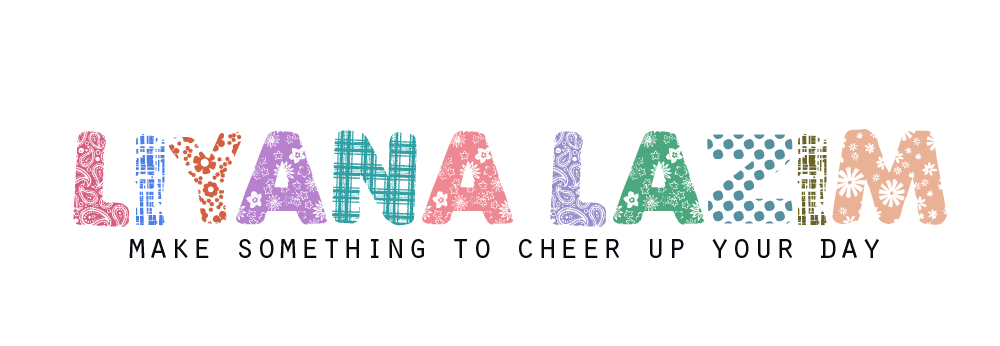
<style>
.page{position:relative;width:1000px;height:346px;background:#ffffff}
.page>*{position:absolute;margin:0}
.t1{font:80px "PatchFun";color:#d65d7f}
.t2{font:80px "PatchFun";color:#4c7fe8}
.t3{font:80px "PatchFun";color:#d15f40}
.t4{font:80px "PatchFun";color:#b781cd}
.t5{font:80px "PatchFun";color:#30a0a4}
.t6{font:80px "PatchFun";color:#ee8993}
.t7{font:80px "PatchFun";color:#998ec9}
.t8{font:80px "PatchFun";color:#4ba77d}
.t9{font:80px "PatchFun";color:#568f9d}
.t10{font:80px "PatchFun";color:#6a6328}
.t11{font:80px "PatchFun";color:#e9b195}
.t12{font:36px "OratorStd";color:#0c0910}
</style>
<div class="page">
<p class="t1" style="left:73px;top:128px;width:874px;height:99px">L<span class="t2">I</span><span class="t3">Y</span><span class="t4">A</span><span class="t5">N</span><span class="t6">A </span><span class="t7">L</span><span class="t8">A</span><span class="t9">Z</span><span class="t10">I</span><span class="t11">M</span></p>
<p class="t12" style="left:129px;top:239px;width:750px;height:19px">make something to cheer up your day</p>
</div>
